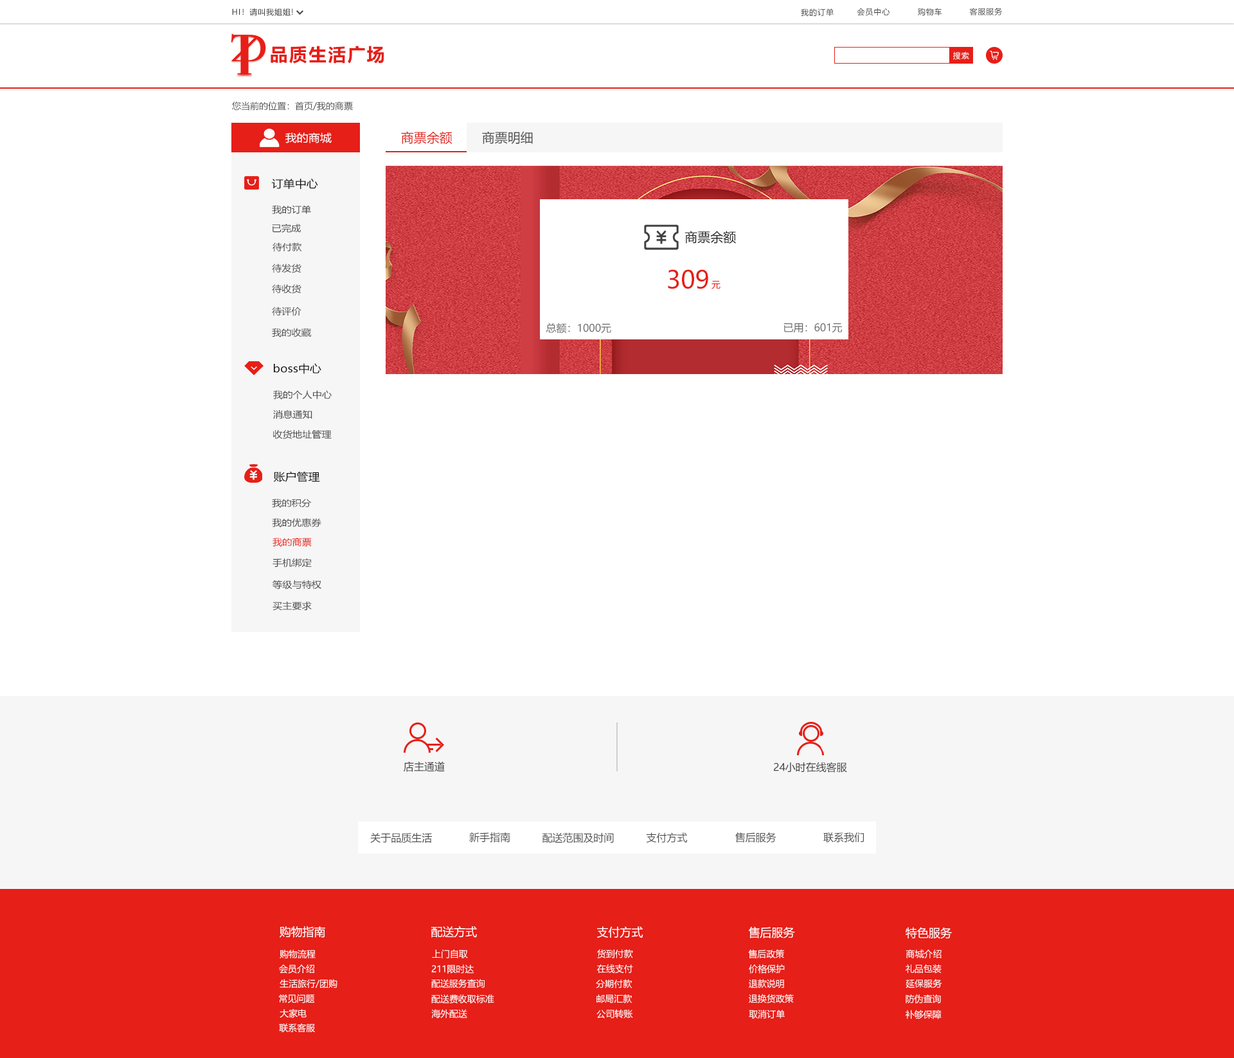
<style>
.page{position:relative;width:1234px;height:1058px;background:#ffffff}
.page>*{position:absolute;margin:0}
.t1{font:7.7px "MicrosoftYaHei";letter-spacing:0.08em;color:#404040}
.t2{font:18px "MicrosoftYaHei-Bold";letter-spacing:0.08em;color:#e61f18}
.t3{font:7.7px "MicrosoftYaHei";letter-spacing:0.08em;color:#ffffff}
.t4{font:9px "MicrosoftYaHei";color:#505050}
.t5{font:10.6px "MicrosoftYaHei";color:#ffffff;scale:1.09 1}
.t6{font:12.9px "MicrosoftYaHei";color:#e61f18}
.t7{font:12.9px "MicrosoftYaHei";color:#505050}
.t8{font:10.6px "MicrosoftYaHei";color:#101010;scale:1.09 1}
.t9{font:9px "MicrosoftYaHei";color:#484848;scale:1.09 1}
.t10{font:12.9px "MicrosoftYaHei";color:#202020}
.t11{font:24.4px "MicrosoftYaHei";color:#e61f18}
.t12{font:9px "MicrosoftYaHei";color:#e61f18}
.t13{font:10.3px "MicrosoftYaHei";color:#666666}
.t14{font:9px "MicrosoftYaHei";color:#e61f18;scale:1.09 1}
.t15{font:10.3px "MicrosoftYaHei";color:#404040}
.t16{font:10.3px "MicrosoftYaHei";color:#505050}
.t17{font:11.6px "MicrosoftYaHei";color:#ffffff}
.t18{font:9px "MicrosoftYaHei";color:#ffffff}
</style>
<div class="page">
<p class="t1" style="left:232px;top:8px;width:61px;height:8px">HI！请叫我姐姐!</p>
<p class="t1" style="left:801px;top:8px;width:33px;height:8px">我的订单</p>
<p class="t1" style="left:857px;top:8px;width:33px;height:8px">会员中心</p>
<p class="t1" style="left:918px;top:8px;width:24px;height:8px">购物车</p>
<p class="t1" style="left:969px;top:8px;width:34px;height:7px">客服服务</p>
<p class="t2" style="left:271px;top:46px;width:113px;height:18px">品质生活广场</p>
<p class="t3" style="left:953px;top:51px;width:16px;height:9px">搜索</p>
<p class="t4" style="left:232px;top:102px;width:121px;height:9px">您当前的位置：首页/我的商票</p>
<p class="t5" style="left:285px;top:132px;width:47px;height:11px">我的商城</p>
<p class="t6" style="left:401px;top:131px;width:52px;height:14px">商票余额</p>
<p class="t7" style="left:482px;top:131px;width:51px;height:13px">商票明细</p>
<p class="t8" style="left:271px;top:178px;width:47px;height:11px">订单中心</p>
<p class="t9" style="left:272px;top:205px;width:39px;height:9px">我的订单</p>
<p class="t9" style="left:272px;top:224px;width:29px;height:9px">已完成</p>
<p class="t10" style="left:685px;top:231px;width:51px;height:13px">商票余额</p>
<p class="t9" style="left:273px;top:242px;width:29px;height:10px">待付款</p>
<p class="t9" style="left:272px;top:264px;width:30px;height:9px">待发货</p>
<p class="t11" style="left:668px;top:269px;width:40px;height:20px">309</p>
<p class="t12" style="left:712px;top:281px;width:9px;height:8px">元</p>
<p class="t9" style="left:272px;top:284px;width:30px;height:10px">待收货</p>
<p class="t9" style="left:272px;top:307px;width:30px;height:9px">待评价</p>
<p class="t9" style="left:272px;top:328px;width:39px;height:10px">我的收藏</p>
<p class="t13" style="left:546px;top:323px;width:65px;height:11px">总额：1000元</p>
<p class="t13" style="left:784px;top:323px;width:59px;height:10px">已用：601元</p>
<p class="t8" style="left:274px;top:363px;width:47px;height:11px">boss中心</p>
<p class="t9" style="left:273px;top:390px;width:59px;height:9px">我的个人中心</p>
<p class="t9" style="left:273px;top:410px;width:39px;height:9px">消息通知</p>
<p class="t9" style="left:273px;top:430px;width:59px;height:9px">收货地址管理</p>
<p class="t8" style="left:273px;top:471px;width:47px;height:11px">账户管理</p>
<p class="t9" style="left:272px;top:499px;width:40px;height:9px">我的积分</p>
<p class="t9" style="left:272px;top:518px;width:49px;height:9px">我的优惠券</p>
<p class="t14" style="left:273px;top:537px;width:39px;height:10px">我的商票</p>
<p class="t9" style="left:273px;top:558px;width:39px;height:10px">手机绑定</p>
<p class="t9" style="left:273px;top:580px;width:48px;height:10px">等级与特权</p>
<p class="t9" style="left:273px;top:601px;width:39px;height:10px">买主要求</p>
<p class="t15" style="left:404px;top:761px;width:41px;height:11px">店主通道</p>
<p class="t15" style="left:774px;top:762px;width:73px;height:11px">24小时在线客服</p>
<p class="t16" style="left:370px;top:833px;width:62px;height:10px">关于品质生活</p>
<p class="t16" style="left:469px;top:832px;width:41px;height:11px">新手指南</p>
<p class="t16" style="left:543px;top:833px;width:71px;height:10px">配送范围及时间</p>
<p class="t16" style="left:646px;top:833px;width:42px;height:10px">支付方式</p>
<p class="t16" style="left:735px;top:833px;width:42px;height:10px">售后服务</p>
<p class="t16" style="left:824px;top:833px;width:40px;height:10px">联系我们</p>
<p class="t17" style="left:280px;top:926px;width:45px;height:12px">购物指南</p>
<p class="t17" style="left:431px;top:926px;width:46px;height:12px">配送方式</p>
<p class="t17" style="left:597px;top:926px;width:47px;height:12px">支付方式</p>
<p class="t17" style="left:748px;top:926px;width:47px;height:13px">售后服务</p>
<p class="t17" style="left:906px;top:927px;width:46px;height:12px">特色服务</p>
<p class="t18" style="left:280px;top:950px;width:36px;height:9px">购物流程</p>
<p class="t18" style="left:432px;top:950px;width:36px;height:9px">上门自取</p>
<p class="t18" style="left:597px;top:950px;width:36px;height:9px">货到付款</p>
<p class="t18" style="left:748px;top:950px;width:36px;height:9px">售后政策</p>
<p class="t18" style="left:906px;top:950px;width:36px;height:9px">商城介绍</p>
<p class="t18" style="left:279px;top:964px;width:35px;height:10px">会员介绍</p>
<p class="t18" style="left:431px;top:964px;width:43px;height:10px">211限时达</p>
<p class="t18" style="left:597px;top:964px;width:36px;height:9px">在线支付</p>
<p class="t18" style="left:749px;top:964px;width:36px;height:10px">价格保护</p>
<p class="t18" style="left:906px;top:964px;width:36px;height:9px">礼品包装</p>
<p class="t18" style="left:280px;top:979px;width:58px;height:9px">生活旅行/团购</p>
<p class="t18" style="left:431px;top:979px;width:54px;height:9px">配送服务查询</p>
<p class="t18" style="left:596px;top:979px;width:36px;height:10px">分期付款</p>
<p class="t18" style="left:749px;top:979px;width:35px;height:10px">退款说明</p>
<p class="t18" style="left:906px;top:979px;width:36px;height:9px">延保服务</p>
<p class="t18" style="left:279px;top:995px;width:36px;height:9px">常见问题</p>
<p class="t18" style="left:431px;top:995px;width:63px;height:9px">配送费收取标准</p>
<p class="t18" style="left:597px;top:995px;width:35px;height:9px">邮局汇款</p>
<p class="t18" style="left:749px;top:994px;width:45px;height:10px">退换货政策</p>
<p class="t18" style="left:906px;top:995px;width:35px;height:9px">防伪查询</p>
<p class="t18" style="left:280px;top:1009px;width:27px;height:9px">大家电</p>
<p class="t18" style="left:431px;top:1009px;width:36px;height:9px">海外配送</p>
<p class="t18" style="left:597px;top:1009px;width:36px;height:10px">公司转账</p>
<p class="t18" style="left:749px;top:1010px;width:36px;height:9px">取消订单</p>
<p class="t18" style="left:906px;top:1010px;width:36px;height:10px">补够保障</p>
<p class="t18" style="left:279px;top:1023px;width:36px;height:9px">联系客服</p>
</div>
